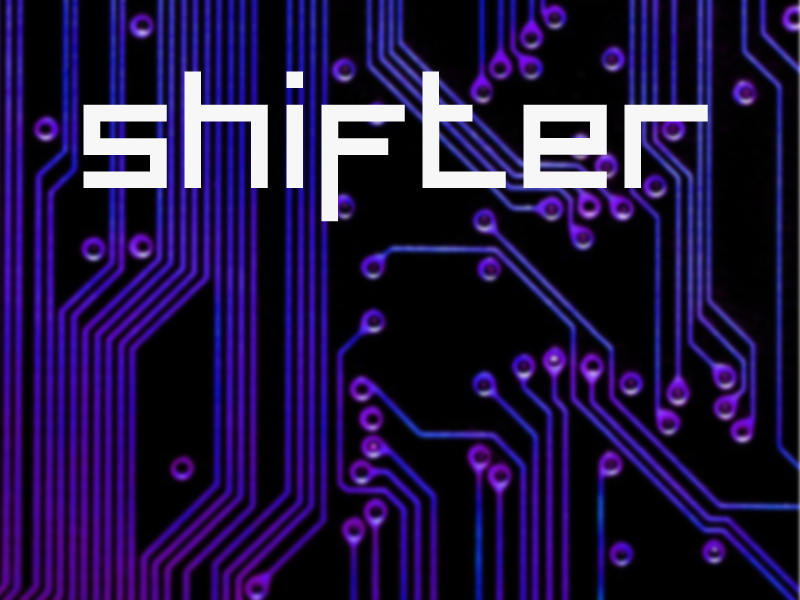
<style>
.page{position:relative;width:800px;height:600px}
.page>*{position:absolute;margin:0}
.t1{font:150px "BitLow";color:#fbfbfb}
</style>
<div class="page">
<p class="t1" style="left:83px;top:71px;width:625px;height:151px">SHIFTER</p>
</div>
